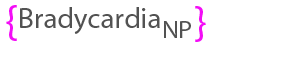
<style>
.page{position:relative;width:300px;height:60px;background:#ffffff}
.page>*{position:absolute;margin:0}
.t1{font:45.8px "MyriadPro-Regular";color:#f30df6}
.t2{font:29.2px "MyriadPro-Regular";color:#525252}
.t3{font:25px "MyriadPro-Regular";color:#525252}
</style>
<div class="page">
<p class="t1" style="left:6px;top:5px;width:11px;height:36px">{</p>
<p class="t1" style="left:195px;top:6px;width:11px;height:36px">}</p>
<p class="t2" style="left:20px;top:7px;width:140px;height:27px">Bradycardia</p>
<p class="t3" style="left:164px;top:21px;width:27px;height:17px">NP</p>
</div>
